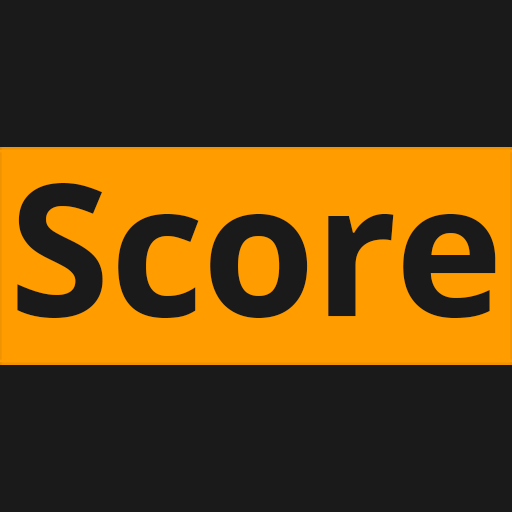
<style>
.page{position:relative;width:512px;height:512px;background:#1a1a1a}
.page>*{position:absolute;margin:0}
.t1{font:183px "OpenSans-Bold";color:#1a1a1a}
</style>
<div class="page">
<p class="t1" style="left:17px;top:183px;width:479px;height:135px">Score</p>
</div>
